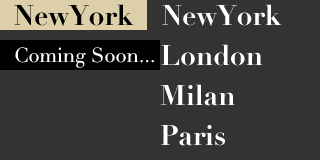
<style>
.page{position:relative;width:320px;height:160px;background:#333333}
.page>*{position:absolute;margin:0}
.t1{font:28px "Didot-Bold";color:#000000}
.t2{font:28px "Didot-Bold";color:#ffffff}
.t3{font:20px "Didot";color:#ffffff}
.t4{font:28px/20px "Didot-Bold";color:#ffffff}
.t5{font:28px/20px "Didot-Bold";color:#e7745a}
</style>
<div class="page">
<p class="t1" style="left:14px;top:4px;width:120px;height:22px">NewYork</p>
<p class="t2" style="left:162px;top:4px;width:120px;height:22px">NewYork</p>
<p class="t3" style="left:15px;top:47px;width:139px;height:21px">Coming Soon...</p>
<p class="t4" style="left:160px;top:44px;width:103px;height:102px"><span class="t5"><br><br></span>London<br><br>Milan<br><br>Paris</p>
</div>
